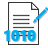
<style>
.page{position:relative;width:48px;height:48px;background:#ffffff}
.page>*{position:absolute;margin:0}
.t1{font:15px "SegoeUIBlack";color:#01aced}
</style>
<div class="page">
<p class="t1" style="left:4px;top:30px;width:32px;height:11px">1010</p>
</div>
